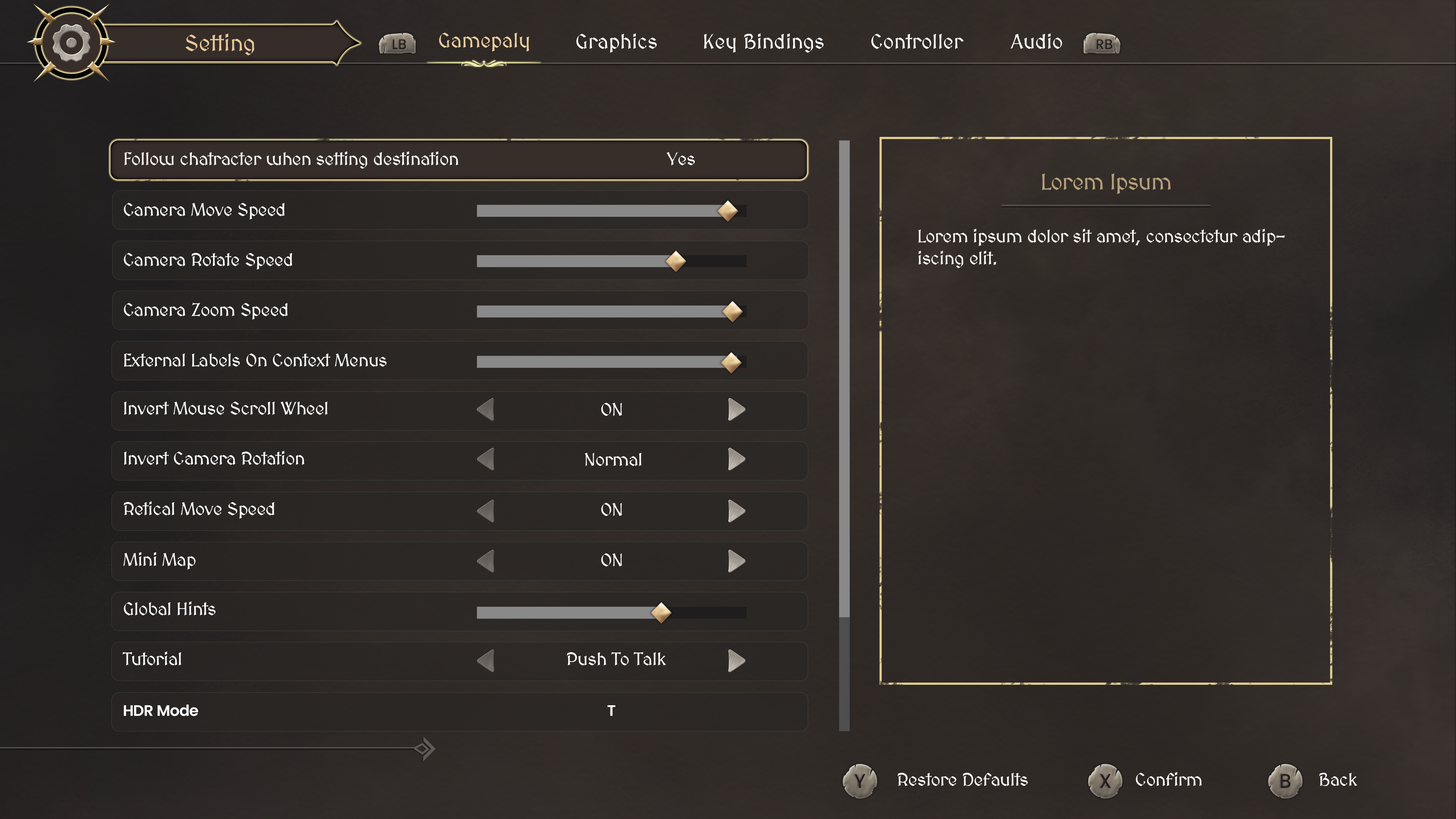
<style>
.page{position:relative;width:1456px;height:819px}
.page>*{position:absolute;margin:0}
.t1{font:22.7px "MedievalSharp";color:#e6c899}
.t2{font:20.5px "MedievalSharp";color:#eccf9f}
.t3{font:20.5px "MedievalSharp";color:#ffffff}
.t4{font:18.2px "MedievalSharp";letter-spacing:-0.02em;color:#ffffff}
.t5{font:22.7px "MedievalSharp";letter-spacing:-0.02em;color:#b79f7b}
.t6{font:18.2px "MedievalSharp";letter-spacing:-0.02em;color:#fffbf5}
.t7{font:15.2px "Poppins-SemiBold";letter-spacing:-0.02em;color:#ffffff}
</style>
<div class="page">
<p class="t1" style="left:185px;top:33px;width:69px;height:22px">Setting</p>
<p class="t2" style="left:439px;top:33px;width:90px;height:19px">Gamepaly</p>
<p class="t3" style="left:576px;top:33px;width:81px;height:20px">Graphics</p>
<p class="t3" style="left:704px;top:33px;width:120px;height:20px">Key Bindings</p>
<p class="t3" style="left:871px;top:34px;width:93px;height:15px">Controller</p>
<p class="t3" style="left:1010px;top:33px;width:52px;height:16px">Audio</p>
<p class="t4" style="left:124px;top:151px;width:334px;height:18px">Follow chatracter when setting destination</p>
<p class="t4" style="left:667px;top:152px;width:28px;height:13px">Yes</p>
<p class="t5" style="left:1042px;top:173px;width:129px;height:21px">Lorem Ipsum</p>
<p class="t4" style="left:124px;top:203px;width:161px;height:17px">Camera Move Speed</p>
<p class="t6" style="left:918px;top:229px;width:367px;height:39px">Lorem ipsum dolor sit amet, consectetur adipiscing elit.</p>
<p class="t4" style="left:124px;top:253px;width:168px;height:17px">Camera Rotate Speed</p>
<p class="t4" style="left:124px;top:303px;width:164px;height:17px">Camera Zoom Speed</p>
<p class="t4" style="left:124px;top:353px;width:263px;height:14px">External Labels On Context Menus</p>
<p class="t4" style="left:124px;top:402px;width:204px;height:13px">Invert Mouse Scroll Wheel</p>
<p class="t4" style="left:601px;top:403px;width:21px;height:13px">ON</p>
<p class="t4" style="left:124px;top:451px;width:180px;height:14px">Invert Camera Rotation</p>
<p class="t4" style="left:585px;top:453px;width:57px;height:13px">Normal</p>
<p class="t4" style="left:124px;top:501px;width:151px;height:18px">Retical Move Speed</p>
<p class="t4" style="left:601px;top:503px;width:21px;height:13px">ON</p>
<p class="t4" style="left:123px;top:552px;width:73px;height:18px">Mini Map</p>
<p class="t4" style="left:601px;top:553px;width:21px;height:13px">ON</p>
<p class="t4" style="left:124px;top:601px;width:92px;height:14px">Global Hints</p>
<p class="t4" style="left:122px;top:651px;width:59px;height:14px">Tutorial</p>
<p class="t4" style="left:567px;top:652px;width:99px;height:13px">Push To Talk</p>
<p class="t7" style="left:124px;top:704px;width:74px;height:12px">HDR Mode</p>
<p class="t7" style="left:607px;top:705px;width:8px;height:11px">T</p>
<p class="t4" style="left:897px;top:773px;width:131px;height:13px">Restore Defaults</p>
<p class="t4" style="left:1136px;top:772px;width:66px;height:14px">Confirm</p>
<p class="t4" style="left:1319px;top:773px;width:38px;height:13px">Back</p>
</div>
